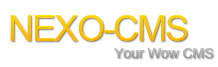
<style>
.page{position:relative;width:218px;height:67px;background:#ffffff}
.page>*{position:absolute;margin:0}
.t1{font:36px "ArialMT";letter-spacing:-0.05em;color:#ffc300}
.t2{font:14px "ArialMT";color:#aaaaaa}
</style>
<div class="page">
<p class="t1" style="left:10px;top:15px;width:177px;height:26px">NEXO-CMS</p>
<p class="t1" style="left:10px;top:15px;width:177px;height:26px">NEXO-CMS</p>
<p class="t2" style="left:114px;top:48px;width:99px;height:10px">Your Wow CMS</p>
<p class="t2" style="left:114px;top:48px;width:99px;height:10px">Your Wow CMS</p>
</div>
